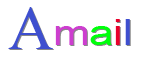
<style>
.page{position:relative;width:143px;height:59px;background:#ffffff}
.page>*{position:absolute;margin:0}
.t1{font:62.1px "TimesNewRomanPSMT";color:#3e4fcf}
.t2{font:36px "ArialMT";color:#cd3ecf;scale:1.21 1}
.t3{font:36px "ArialMT";color:#00ff0c;scale:1.21 1}
.t4{font:36px "ArialMT";color:#e8012c;scale:1.21 1}
.t5{font:36px "ArialMT";color:#3e4fcf;scale:1.21 1}
.t6{font:36px "ArialMT";scale:1.21 1}
.t7{font:62.1px "TimesNewRomanPSMT"}
</style>
<div class="page">
<p class="t1" style="left:8px;top:7px;width:122px;height:42px">A<span class="t2">m</span><span class="t3">a</span><span class="t4">i</span><span class="t5">l</span></p>
<p class="t6" style="left:9px;top:8px;width:122px;height:42px"><span class="t7">A</span>mail</p>
</div>
